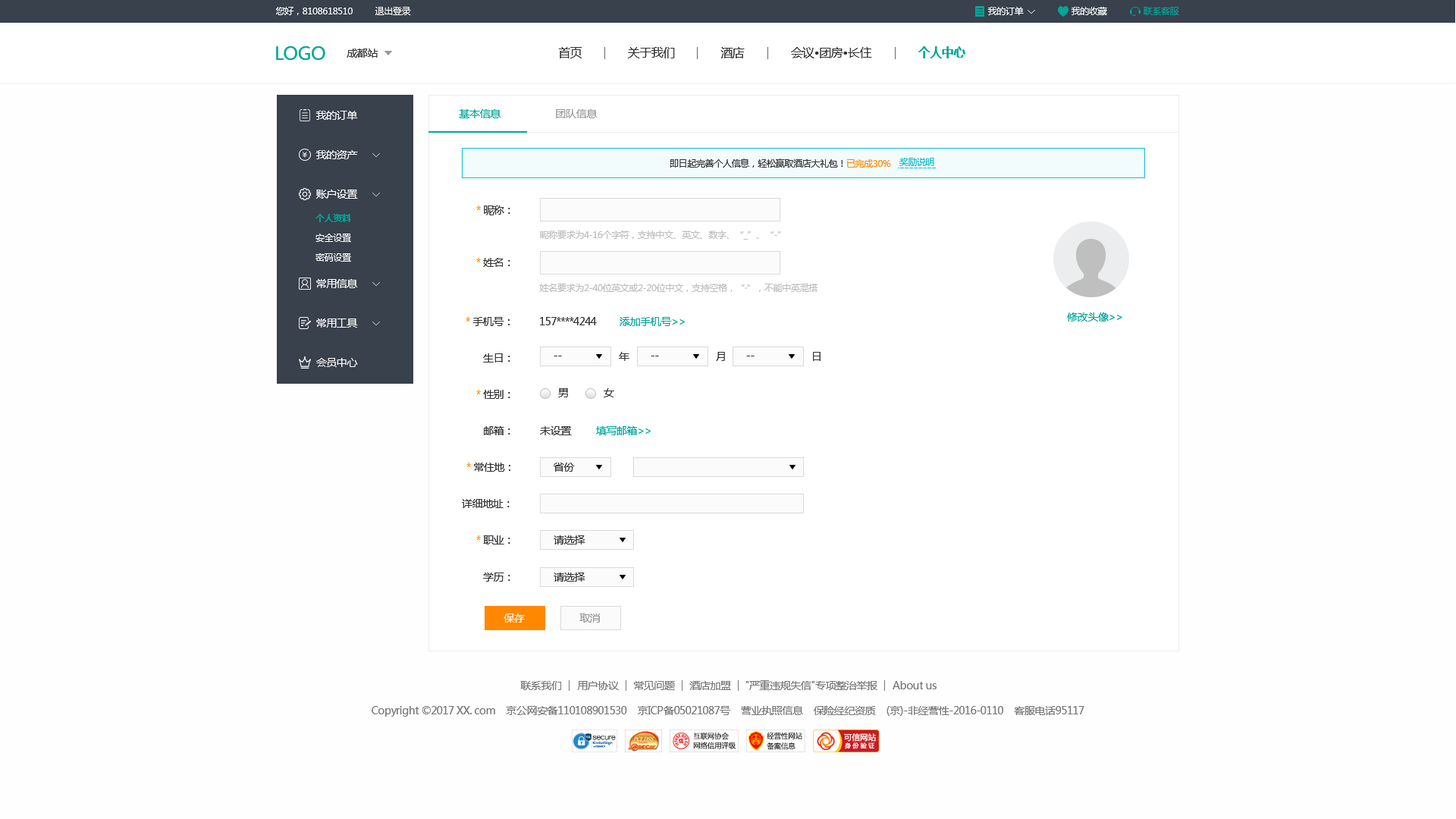
<style>
.page{position:relative;width:1456px;height:819px;background:#fefefe}
.page>*{position:absolute;margin:0}
.t1{font:9.1px "MicrosoftYaHei";letter-spacing:-0.03em;color:#ffffff}
.t2{font:9.1px "MicrosoftYaHei";letter-spacing:-0.03em;color:#00a699}
.t3{font:18.2px "MicrosoftYaHei";letter-spacing:-0.03em;color:#00a699}
.t4{font:10.6px "MicrosoftYaHei";letter-spacing:-0.03em;color:#333333}
.t5{font:12.1px "MicrosoftYaHei";letter-spacing:-0.03em;color:#333333}
.t6{font:12.1px "MicrosoftYaHei-Bold";letter-spacing:-0.03em;color:#00a699}
.t7{font:10.6px "MicrosoftYaHei";letter-spacing:-0.03em;color:#ffffff}
.t8{font:10.6px "MicrosoftYaHei";letter-spacing:-0.03em;color:#00a699}
.t9{font:10.6px "MicrosoftYaHei";letter-spacing:-0.03em;color:#999999}
.t10{font:9.1px "MicrosoftYaHei";letter-spacing:-0.03em;color:#333333}
.t11{font:9.1px "MicrosoftYaHei";letter-spacing:-0.03em;color:#ff8800}
.t12{font:9.1px "MicrosoftYaHei";letter-spacing:-0.03em;color:#12bccc}
.t13{font:10.6px "MicrosoftYaHei";letter-spacing:-0.03em;color:#ff8800}
.t14{font:9.1px "MicrosoftYaHei-Bold";letter-spacing:-0.03em;color:#00a699}
.t15{font:9.1px "MicrosoftYaHei";letter-spacing:-0.03em;color:#fefefe}
.t16{font:9.1px "MicrosoftYaHei";letter-spacing:-0.03em;color:#bdbdbd}
.t17{font:10.6px "MicrosoftYaHei";letter-spacing:-0.03em;color:#777777}
</style>
<div class="page">
<p class="t1" style="left:276px;top:7px;width:77px;height:8px">您好，8108618510</p>
<p class="t1" style="left:375px;top:7px;width:36px;height:8px">退出登录</p>
<p class="t1" style="left:987px;top:7px;width:37px;height:8px">我的订单</p>
<p class="t1" style="left:1071px;top:7px;width:36px;height:8px">我的收藏</p>
<p class="t2" style="left:1144px;top:7px;width:35px;height:8px">联系客服</p>
<p class="t3" style="left:276px;top:46px;width:49px;height:14px">LOGO</p>
<p class="t4" style="left:347px;top:49px;width:31px;height:9px">成都站</p>
<p class="t5" style="left:558px;top:47px;width:24px;height:11px">首页</p>
<p class="t5" style="left:628px;top:47px;width:47px;height:11px">关于我们</p>
<p class="t5" style="left:720px;top:47px;width:25px;height:11px">酒店</p>
<p class="t5" style="left:791px;top:47px;width:81px;height:11px">会议•团房•长住</p>
<p class="t6" style="left:918px;top:46px;width:47px;height:12px">个人中心</p>
<p class="t7" style="left:315px;top:111px;width:43px;height:9px">我的订单</p>
<p class="t8" style="left:459px;top:109px;width:42px;height:9px">基本信息</p>
<p class="t9" style="left:556px;top:109px;width:42px;height:9px">团队信息</p>
<p class="t7" style="left:315px;top:150px;width:43px;height:9px">我的资产</p>
<p class="t10" style="left:670px;top:158px;width:221px;height:10px">即日起完善个人信息，轻松赢取酒店大礼包！<span class="t11">已完成30%</span></p>
<p class="t12" style="left:899px;top:158px;width:35px;height:8px">奖励说明</p>
<p class="t7" style="left:316px;top:190px;width:42px;height:9px">账户设置</p>
<p class="t4" style="left:476px;top:206px;width:34px;height:9px"><span class="t13">* </span>昵称：</p>
<p class="t14" style="left:315px;top:214px;width:36px;height:8px">个人资料</p>
<p class="t15" style="left:315px;top:234px;width:36px;height:8px">安全设置</p>
<p class="t16" style="left:540px;top:231px;width:241px;height:9px">昵称要求为4-16个字符，支持中文、英文、数字、“_”、“-”</p>
<p class="t15" style="left:315px;top:253px;width:36px;height:9px">密码设置</p>
<p class="t4" style="left:476px;top:258px;width:34px;height:9px"><span class="t13">* </span>姓名：</p>
<p class="t7" style="left:316px;top:279px;width:42px;height:9px">常用信息</p>
<p class="t16" style="left:539px;top:284px;width:278px;height:8px">姓名要求为2-40位英文或2-20位中文，支持空格，“·”，不能中英混搭</p>
<p class="t4" style="left:466px;top:317px;width:44px;height:9px"><span class="t13">* </span>手机号：</p>
<p class="t4" style="left:540px;top:317px;width:57px;height:8px">157****4244</p>
<p class="t8" style="left:620px;top:317px;width:66px;height:9px">添加手机号&gt;&gt;</p>
<p class="t8" style="left:1067px;top:312px;width:55px;height:10px">修改头像&gt;&gt;</p>
<p class="t7" style="left:316px;top:318px;width:42px;height:10px">常用工具</p>
<p class="t4" style="left:483px;top:353px;width:27px;height:9px">生日：</p>
<p class="t4" style="left:619px;top:352px;width:10px;height:9px">年</p>
<p class="t4" style="left:716px;top:352px;width:9px;height:9px">月</p>
<p class="t4" style="left:813px;top:352px;width:8px;height:9px">日</p>
<p class="t7" style="left:316px;top:358px;width:42px;height:9px">会员中心</p>
<p class="t4" style="left:554px;top:356px;width:8px;height:0px">--</p>
<p class="t4" style="left:651px;top:356px;width:8px;height:0px">--</p>
<p class="t4" style="left:746px;top:356px;width:9px;height:0px">--</p>
<p class="t4" style="left:476px;top:390px;width:34px;height:9px"><span class="t13">* </span>性别：</p>
<p class="t4" style="left:558px;top:388px;width:10px;height:9px">男</p>
<p class="t4" style="left:604px;top:388px;width:10px;height:9px">女</p>
<p class="t4" style="left:484px;top:426px;width:26px;height:9px">邮箱：</p>
<p class="t4" style="left:540px;top:426px;width:32px;height:9px">未设置</p>
<p class="t8" style="left:596px;top:426px;width:55px;height:9px">填写邮箱&gt;&gt;</p>
<p class="t4" style="left:466px;top:463px;width:44px;height:9px"><span class="t13">* </span>常住地：</p>
<p class="t4" style="left:554px;top:463px;width:21px;height:9px">省份</p>
<p class="t4" style="left:462px;top:499px;width:48px;height:9px">详细地址：</p>
<p class="t4" style="left:476px;top:535px;width:34px;height:9px"><span class="t13">* </span>职业：</p>
<p class="t4" style="left:554px;top:535px;width:31px;height:9px">请选择</p>
<p class="t4" style="left:483px;top:573px;width:27px;height:9px">学历：</p>
<p class="t4" style="left:554px;top:573px;width:31px;height:9px">请选择</p>
<p class="t7" style="left:504px;top:613px;width:21px;height:10px">保存</p>
<p class="t9" style="left:579px;top:613px;width:21px;height:10px">取消</p>
<p class="t17" style="left:520px;top:681px;width:41px;height:9px">联系我们</p>
<p class="t17" style="left:577px;top:681px;width:42px;height:9px">用户协议</p>
<p class="t17" style="left:634px;top:681px;width:41px;height:9px">常见问题</p>
<p class="t17" style="left:689px;top:681px;width:42px;height:9px">酒店加盟</p>
<p class="t17" style="left:745px;top:680px;width:132px;height:10px">"严重违规失信"专项整治举报</p>
<p class="t17" style="left:893px;top:681px;width:44px;height:8px">About us</p>
<p class="t17" style="left:372px;top:706px;width:712px;height:11px">Copyright ©2017 XX. com    京公网安备110108901530    京ICP备05021087号    营业执照信息    保险经纪资质    (京)-非经营性-2016-0110    客服电话95117</p>
</div>
